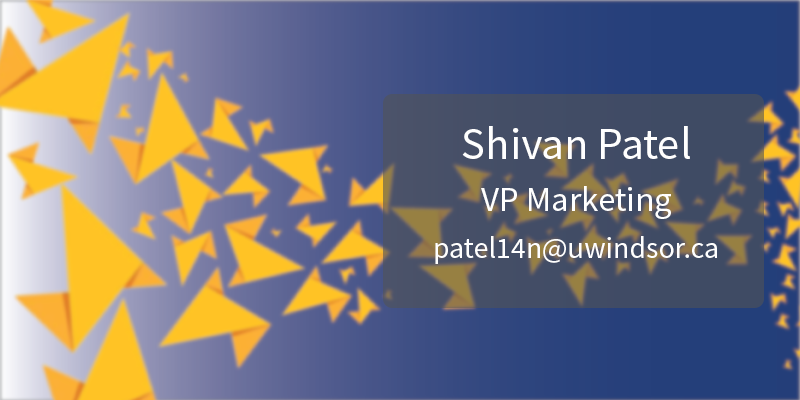
<style>
.page{position:relative;width:800px;height:400px}
.page>*{position:absolute;margin:0}
.t1{font:45px "SourceSansPro-Regular";color:#ffffff}
.t2{font:35px "SourceSansPro-Regular";color:#ffffff}
.t3{font:30px "SourceSansPro-Regular";color:#ffffff}
</style>
<div class="page">
<p class="t1" style="left:462px;top:126px;width:228px;height:33px">Shivan Patel</p>
<p class="t2" style="left:481px;top:186px;width:190px;height:33px">VP Marketing</p>
<p class="t3" style="left:435px;top:236px;width:282px;height:28px">patel14n@uwindsor.ca</p>
</div>
